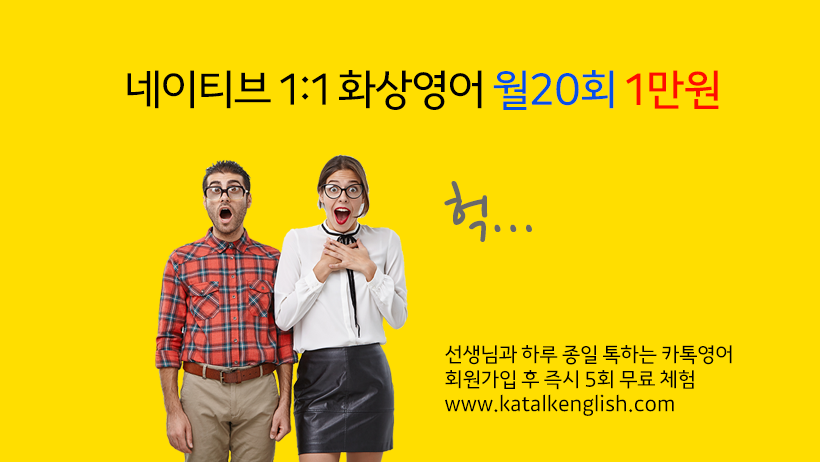
<style>
.page{position:relative;width:820px;height:462px;background:#ffde00}
.page>*{position:absolute;margin:0}
.t1{font:44.9px "KakaoOTFRegular";letter-spacing:-0.025em;color:#000000}
.t2{font:44.9px "KakaoOTFRegular";letter-spacing:-0.025em;color:#054fe5}
.t3{font:44.9px "KakaoOTFRegular";letter-spacing:-0.025em;color:#ff0c00;font-weight:bold}
.t4{font:79.2px "NanumPen";color:#696969}
.t5{font:21.6px/24.9px "KakaoOTFRegular";color:#000000}
</style>
<div class="page">
<p class="t1" style="left:127px;top:70px;width:592px;height:40px">네이티브 1:1 화상영어 <span class="t2">월20회 </span><span class="t3">1만원</span></p>
<p class="t4" style="left:444px;top:181px;width:88px;height:61px">헉...</p>
<p class="t5" style="left:445px;top:345px;width:287px;height:71px">선생님과 하루 종일 톡하는 카톡영어<br>회원가입 후 즉시 5회 무료 체험<br>www.katalkenglish.com</p>
</div>
